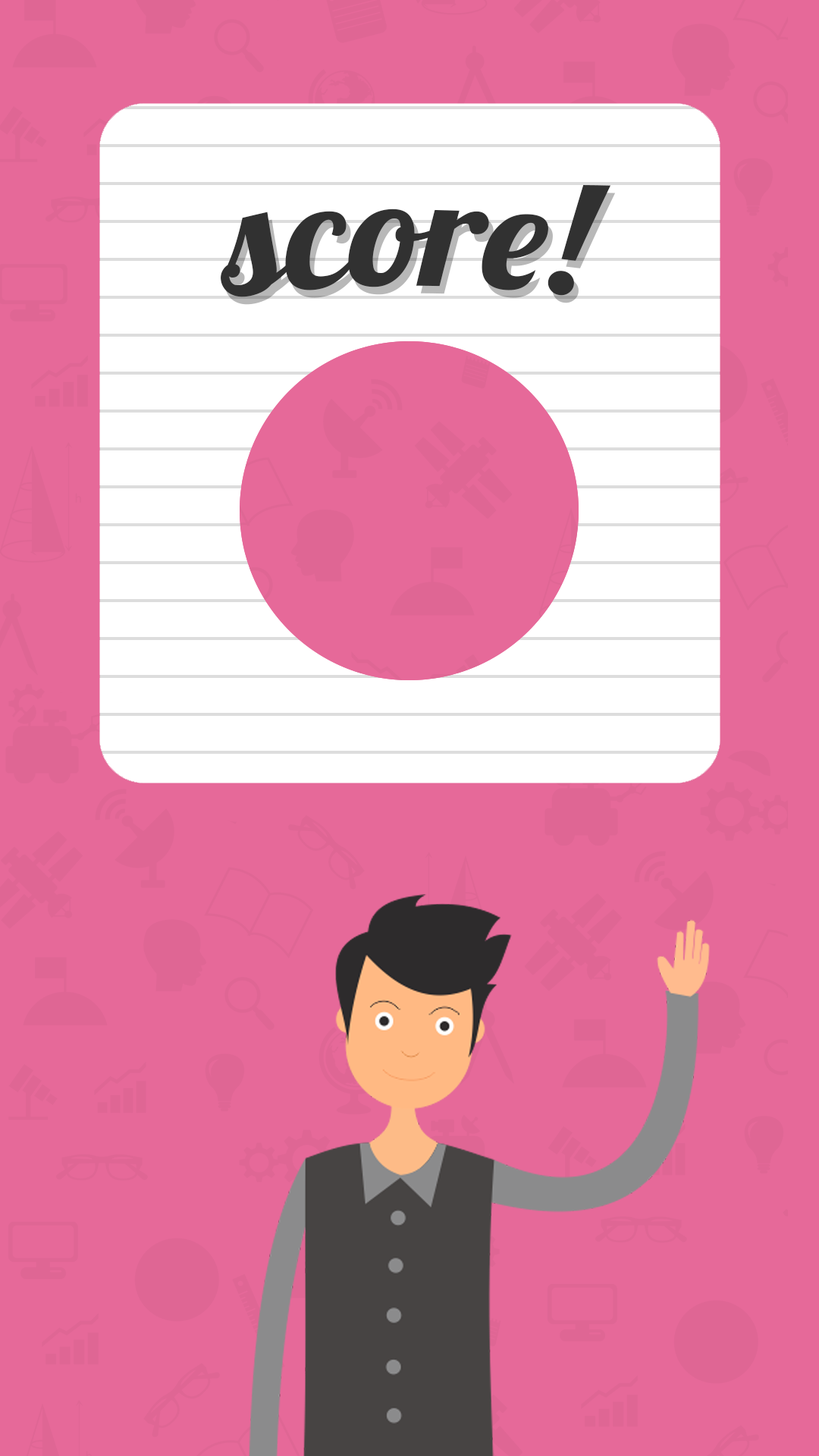
<style>
.page{position:relative;width:819px;height:1456px;background:#e66999}
.page>*{position:absolute;margin:0}
.t1{font:151.7px "Lobster-Regular";color:#313131}
</style>
<div class="page">
<p class="t1" style="left:221px;top:185px;width:390px;height:112px">score!</p>
</div>
